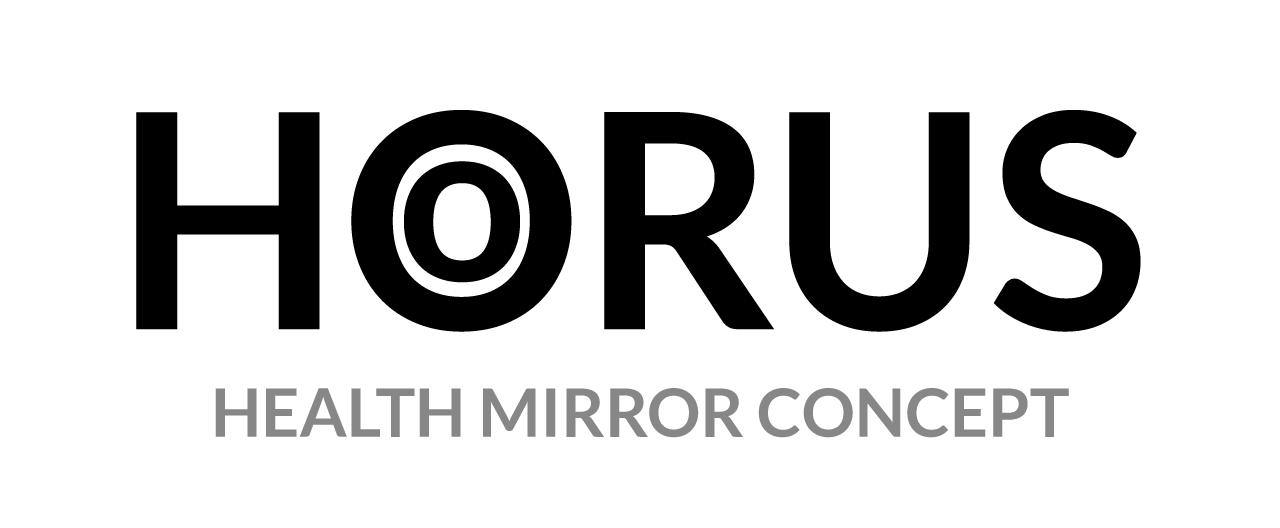
<style>
.page{position:relative;width:1280px;height:528px;background:#ffffff}
.page>*{position:absolute;margin:0}
.t1{font:300px "Lato-Bold";color:#000000}
.t2{font:228.4px "Lato-Bold";color:#000000}
.t3{font:66.7px "Lato-Bold";color:#888787;text-transform:uppercase}
</style>
<div class="page">
<p class="t1" style="left:136px;top:110px;width:1005px;height:222px">HORUS</p>
<p class="t2" style="left:404px;top:161px;width:116px;height:122px">o</p>
<p class="t3" style="left:215px;top:388px;width:854px;height:50px">health mirror concept</p>
</div>
